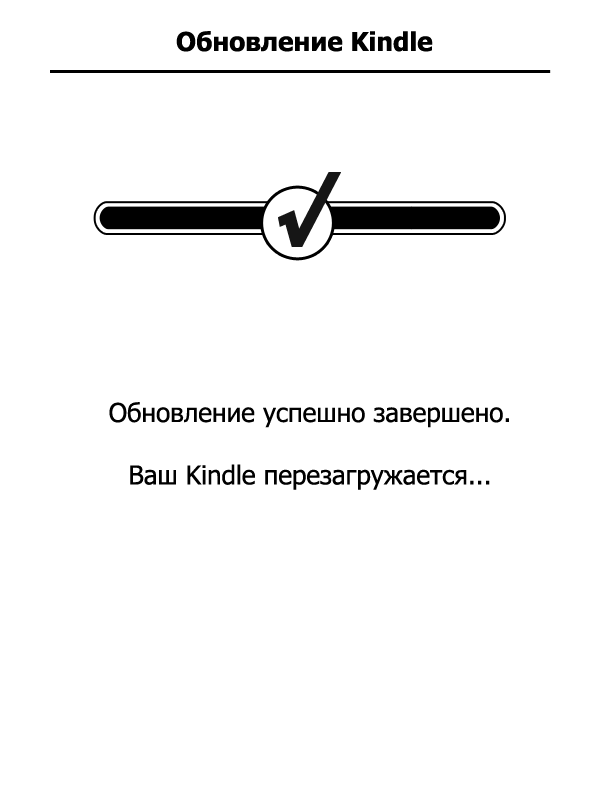
<style>
.page{position:relative;width:600px;height:800px;background:#ffffff}
.page>*{position:absolute;margin:0}
.t1{font:26px "Tahoma-Bold";color:#000000}
.t2{font:26px "Tahoma";color:#000000}
</style>
<div class="page">
<p class="t1" style="left:176px;top:31px;width:257px;height:21px">Обновление Kindle</p>
<p class="t2" style="left:109px;top:402px;width:400px;height:88px;text-align:center">Обновление успешно завершено.<br><br>Ваш Kindle перезагружается...</p>
</div>
